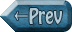
<style>
.page{position:relative;width:72px;height:32px}
.page>*{position:absolute;margin:0}
.t1{font:19.2px "HoboStd";color:#b3c9d5;scale:0.83 1}
.t2{font:24px "ArialMT";color:#b3c9d5;scale:0.6 1}
</style>
<div class="page">
<p class="t1" style="left:14px;top:8px;width:48px;height:16px"><span class="t2">←</span>Prev</p>
</div>
